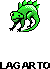
<style>
.page{position:relative;width:50px;height:69px;background:#ffffff}
.page>*{position:absolute;margin:0}
.t1{font:10.3px "Arial-BoldMT";color:#000000;scale:1.11 1}
</style>
<div class="page">
<p class="t1" style="left:0px;top:62px;width:50px;height:7px">LAGARTO</p>
</div>
